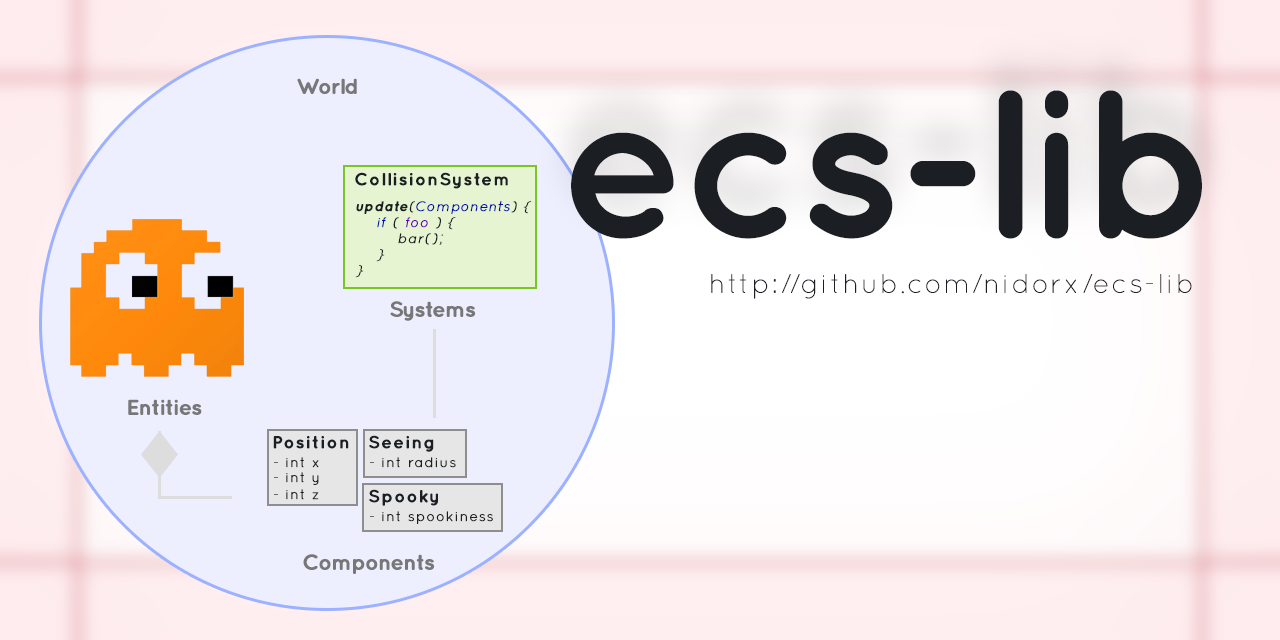
<style>
.page{position:relative;width:1280px;height:640px;background:#edefff}
.page>*{position:absolute;margin:0}
.t1{font:37px "Quicksand-Bold";letter-spacing:-0.05em;color:#777777;font-weight:bold}
.t2{font:361.9px "Quicksand-Bold";letter-spacing:-0.05em;color:#1b1f23;font-weight:bold}
.t3{font:30px "Quicksand-Bold";letter-spacing:0.05em;color:#1b1f23;font-weight:bold}
.t4{font:24px/16px "Quicksand-Italic";letter-spacing:0.05em;color:#1b1f23;font-weight:bold}
.t5{font:24px/16px "Quicksand-BoldItalic";letter-spacing:0.05em;color:#1b1f23;font-weight:bold}
.t6{font:24px/16px "Quicksand-Italic";letter-spacing:0.05em;color:#0011aa;font-weight:bold}
.t7{font:24px/16px "Quicksand-Italic";letter-spacing:0.05em;color:#6600bb;font-weight:bold}
.t8{font:46.2px "Quicksand-Light";letter-spacing:0.05em;color:#1b1f23;font-weight:bold}
.t9{font:24px "Quicksand-Regular";letter-spacing:0.05em;color:#1b1f23;font-weight:bold}
</style>
<div class="page">
<p class="t1" style="left:297px;top:78px;width:60px;height:16px">World</p>
<p class="t2" style="left:571px;top:90px;width:631px;height:149px">ecs-lib</p>
<p class="t3" style="left:355px;top:172px;width:153px;height:17px">CollisionSystem</p>
<p class="t4" style="left:355px;top:201px;width:177px;height:77px"><span class="t5">update</span>(<span class="t6">Components</span>) {<br>    <span class="t6">if </span>( <span class="t7">foo </span>) {<br>        bar();<br>    }<br>}</p>
<p class="t8" style="left:711px;top:274px;width:481px;height:25px">http://github.com/nidorx/ecs-lib</p>
<p class="t1" style="left:390px;top:301px;width:86px;height:20px">Systems</p>
<p class="t1" style="left:128px;top:399px;width:74px;height:16px">Entities</p>
<p class="t3" style="left:273px;top:436px;width:76px;height:13px">Position</p>
<p class="t3" style="left:369px;top:435px;width:65px;height:17px">Seeing</p>
<p class="t9" style="left:274px;top:457px;width:45px;height:11px">- int x</p>
<p class="t9" style="left:370px;top:457px;width:86px;height:11px">- int radius</p>
<p class="t9" style="left:274px;top:472px;width:45px;height:13px">- int y</p>
<p class="t9" style="left:274px;top:489px;width:45px;height:11px">- int z</p>
<p class="t3" style="left:369px;top:489px;width:69px;height:17px">Spooky</p>
<p class="t9" style="left:370px;top:511px;width:123px;height:13px">- int spookiness</p>
<p class="t1" style="left:303px;top:554px;width:132px;height:20px">Components</p>
</div>
